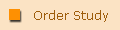
<style>
.page{position:relative;width:120px;height:30px;background:#fbe3c4}
.page>*{position:absolute;margin:0}
.t1{font:12px "Verdana";color:#9e5d0b}
</style>
<div class="page">
<p class="t1" style="left:34px;top:10px;width:74px;height:12px">Order Study</p>
</div>
